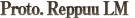
<style>
.page{position:relative;width:135px;height:18px;background:#ffffff}
.page>*{position:absolute;margin:0}
.t1{font:18px "RyuminPro-ExBold";letter-spacing:-0.08em;color:#4a3f32;font-weight:bold;scale:0.9 1}
</style>
<div class="page">
<p class="t1" style="left:0px;top:1px;width:129px;height:18px">Proto. Reppuu LM</p>
</div>
